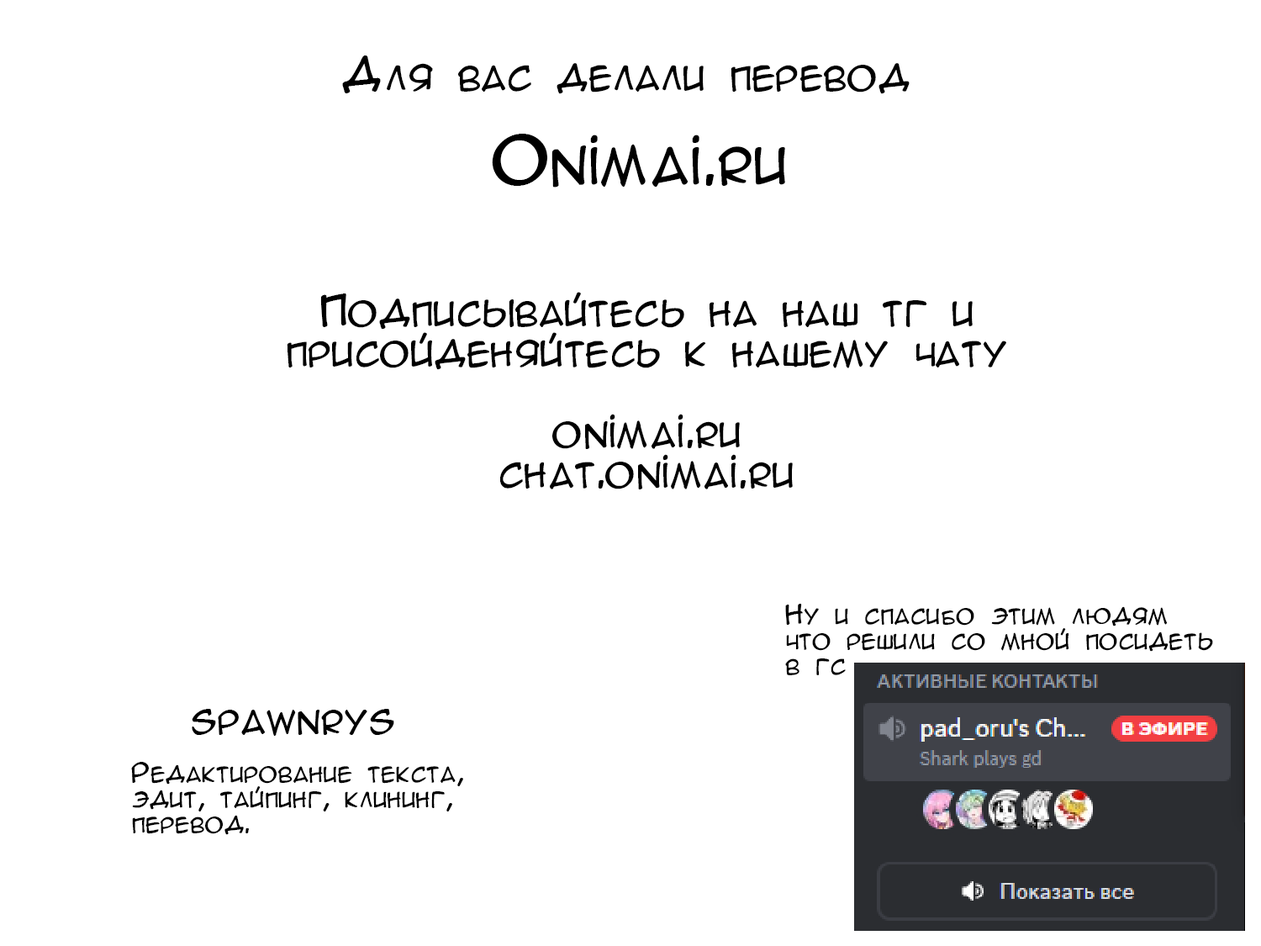
<style>
.page{position:relative;width:1261px;height:946px;background:#ffffff}
.page>*{position:absolute;margin:0}
.t1{font:40.3px "AnimeAcev3";color:#000000}
.t2{font:60.5px "AnimeAcev3";color:#000000}
.t3{font:40.3px/40.3px "AnimeAcev3";color:#000000}
.t4{font:25.2px/25.2px "AnimeAcev3";color:#000000}
.t5{font:30.3px "AnimeAcev3";color:#000000}
</style>
<div class="page">
<p class="t1" style="left:342px;top:55px;width:568px;height:39px">Для вас делали перевод</p>
<p class="t2" style="left:492px;top:134px;width:293px;height:53px">Onimai.ru</p>
<p class="t3" style="left:287px;top:292px;width:719px;height:197px;text-align:center">Подписывайтесь на наш тг и<br>присойденяйтесь к нашему чату<br><br>onimai.ru<br>chat.onimai.ru</p>
<p class="t4" style="left:785px;top:604px;width:428px;height:71px">Ну и спасибо этим людям<br>что решили со мной посидеть<br>в гс</p>
<p class="t5" style="left:192px;top:709px;width:202px;height:27px">SPAWNRYS</p>
<p class="t4" style="left:131px;top:762px;width:332px;height:73px">Редактирование текста,<br>эдит, тайпинг, клининг,<br>перевод.</p>
</div>
